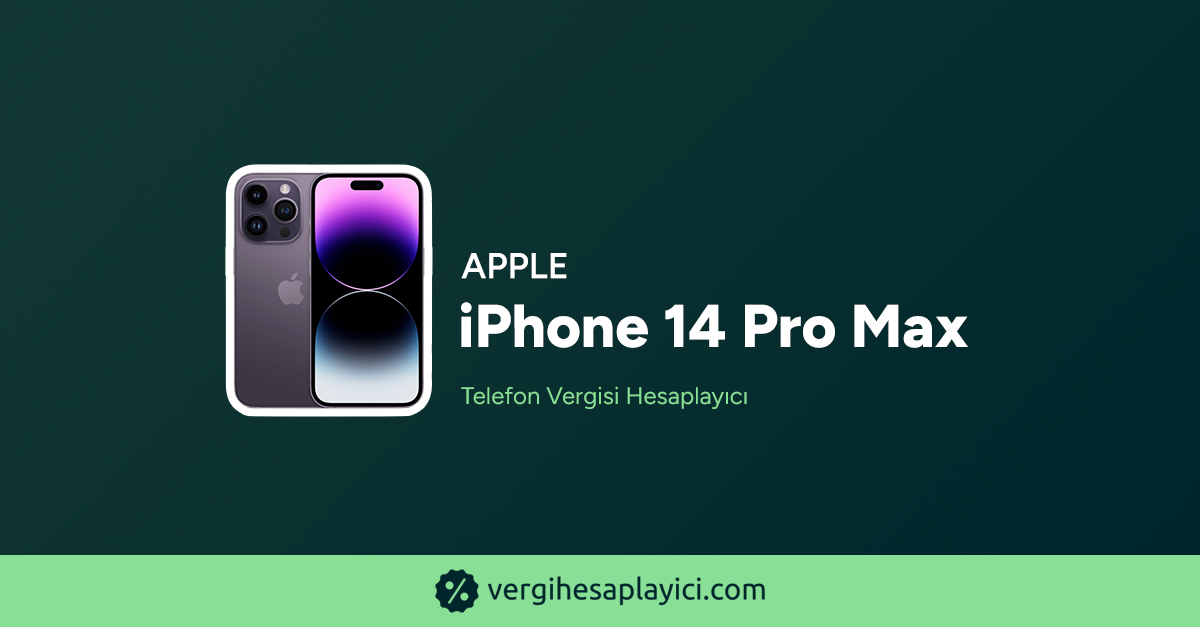
<style>
.page{position:relative;width:1200px;height:627px}
.page>*{position:absolute;margin:0}
.t1{font:36px "Figtree-SemiBold";color:#ffffff;text-transform:uppercase;font-weight:bold}
.t2{font:60.3px "Figtree-ExtraBold";color:#ffffff;font-weight:bold}
.t3{font:24px "Figtree-Regular";color:#88df95;font-weight:bold}
</style>
<div class="page">
<p class="t1" style="left:461px;top:253px;width:106px;height:26px">Apple</p>
<p class="t2" style="left:461px;top:302px;width:507px;height:46px">iPhone 14 Pro Max</p>
<p class="t3" style="left:461px;top:386px;width:286px;height:23px">Telefon Vergisi Hesaplayıcı</p>
</div>
